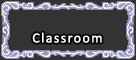
<style>
.page{position:relative;width:136px;height:60px;background:#333333}
.page>*{position:absolute;margin:0}
.t1{font:14px "Calibri";letter-spacing:0.1em;color:#ffffff}
</style>
<div class="page">
<p class="t1" style="left:32px;top:32px;width:70px;height:11px">Classroom</p>
</div>
